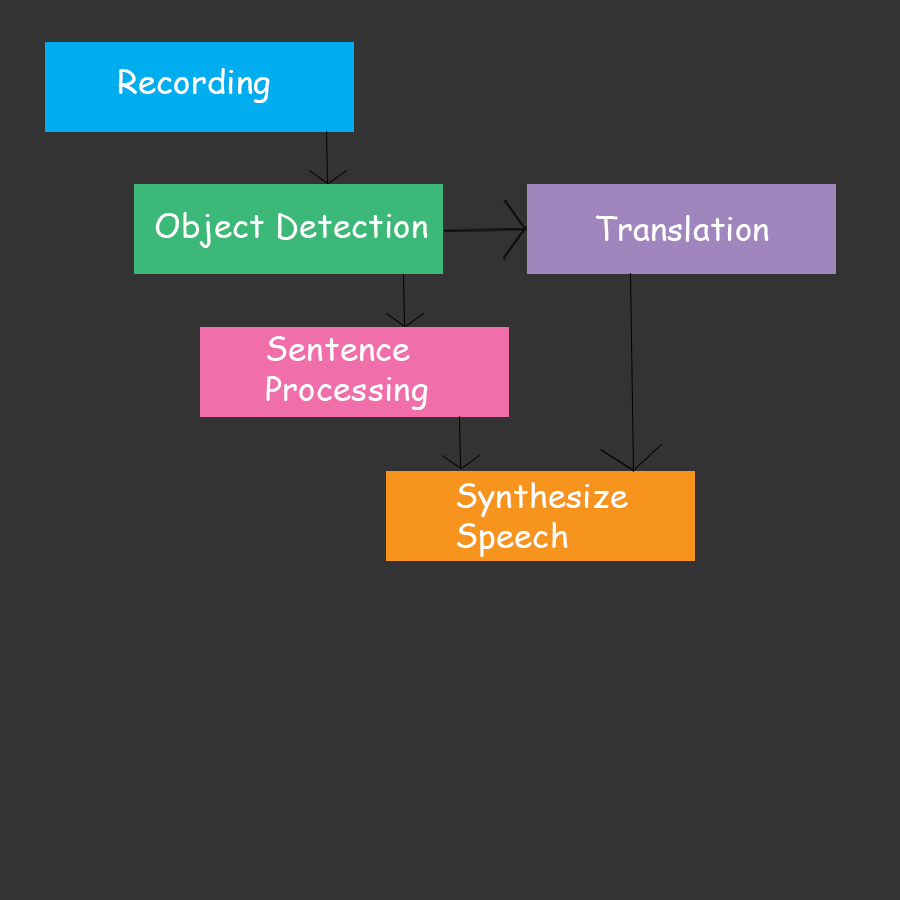
<style>
.page{position:relative;width:900px;height:900px;background:#333333}
.page>*{position:absolute;margin:0}
.t1{font:33.3px "ComicSansMS";color:#ffffff}
</style>
<div class="page">
<p class="t1" style="left:118px;top:68px;width:152px;height:35px">Recording</p>
<p class="t1" style="left:155px;top:212px;width:273px;height:36px">Object Detection</p>
<p class="t1" style="left:595px;top:215px;width:174px;height:27px">Translation</p>
<p class="t1" style="left:266px;top:336px;width:162px;height:74px">Sentence <br>Processing</p>
</div>
